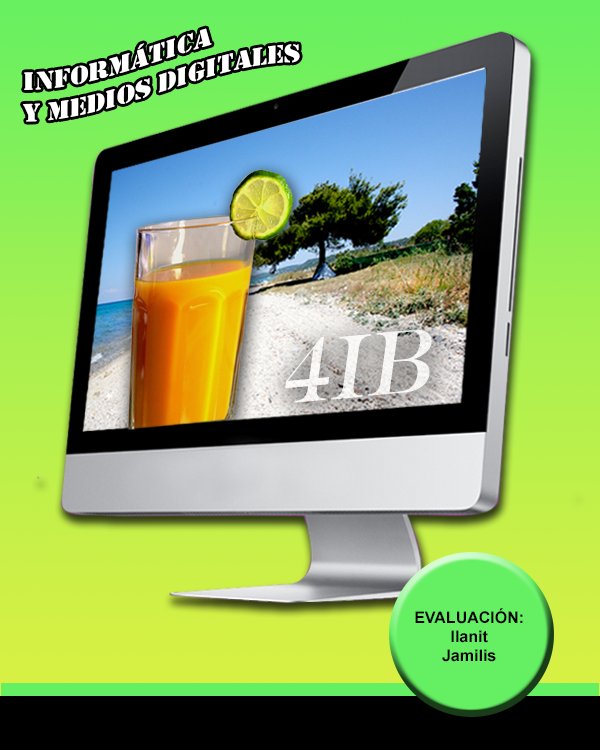
<style>
.page{position:relative;width:600px;height:750px}
.page>*{position:absolute;margin:0}
.t1{font:26.3px "Stencil";color:#ffffff;scale:1.09 1}
.t2{font:93px "EngraversMT";color:#fcfcfb;scale:0.79 1}
.t3{font:16px "Arial-BoldMT";color:#000000}
</style>
<div class="page">
<p class="t1" style="left:23px;top:28px;width:277px;height:94px">INFORMÁTICA<br>Y MEDIOS DIGITALES</p>
<p class="t2" style="left:285px;top:329px;width:147px;height:74px;rotate:-5deg;opacity:0.7">4IB</p>
<p class="t3" style="left:415px;top:608px;width:108px;height:54px;text-align:center">EVALUACIÓN:<br>Ilanit<br>Jamilis</p>
</div>
